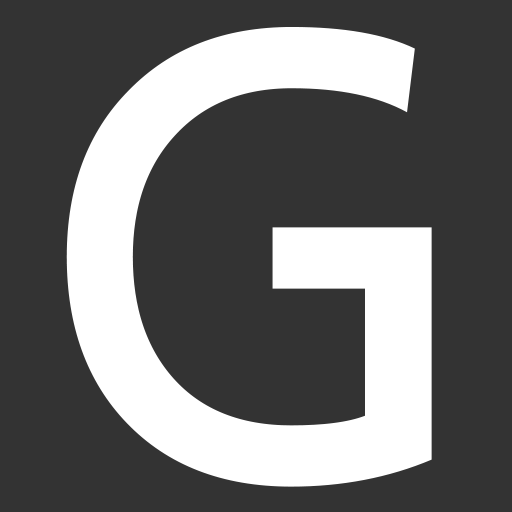
<style>
.page{position:relative;width:512px;height:512px;background:#333333}
.page>*{position:absolute;margin:0}
.t1{font:600px "JejuGothic";color:#ffffff}
</style>
<div class="page">
<p class="t1" style="left:66px;top:27px;width:366px;height:460px">G</p>
</div>
